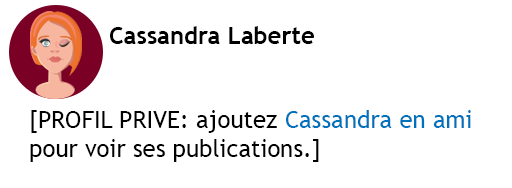
<style>
.page{position:relative;width:512px;height:188px;background:#ffffff}
.page>*{position:absolute;margin:0}
.t1{font:24px "TrebuchetMS-Bold";color:#000000}
.t2{font:24px "TrebuchetMS";color:#000000}
.t3{font:24px "TrebuchetMS";color:#0072bc}
</style>
<div class="page">
<p class="t1" style="left:110px;top:26px;width:204px;height:18px">Cassandra Laberte</p>
<p class="t2" style="left:30px;top:110px;width:441px;height:52px">[PROFIL PRIVE: ajoutez <span class="t3">Cassandra en ami<br></span>pour voir ses publications.]</p>
</div>
